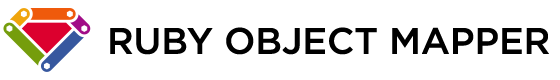
<style>
.page{position:relative;width:560px;height:80px;background:#ffffff}
.page>*{position:absolute;margin:0}
.t1{font:36.7px "Gotham-Medium";color:#000000}
</style>
<div class="page">
<p class="t1" style="left:110px;top:27px;width:439px;height:28px">RUBY OBJECT MAPPER</p>
</div>
